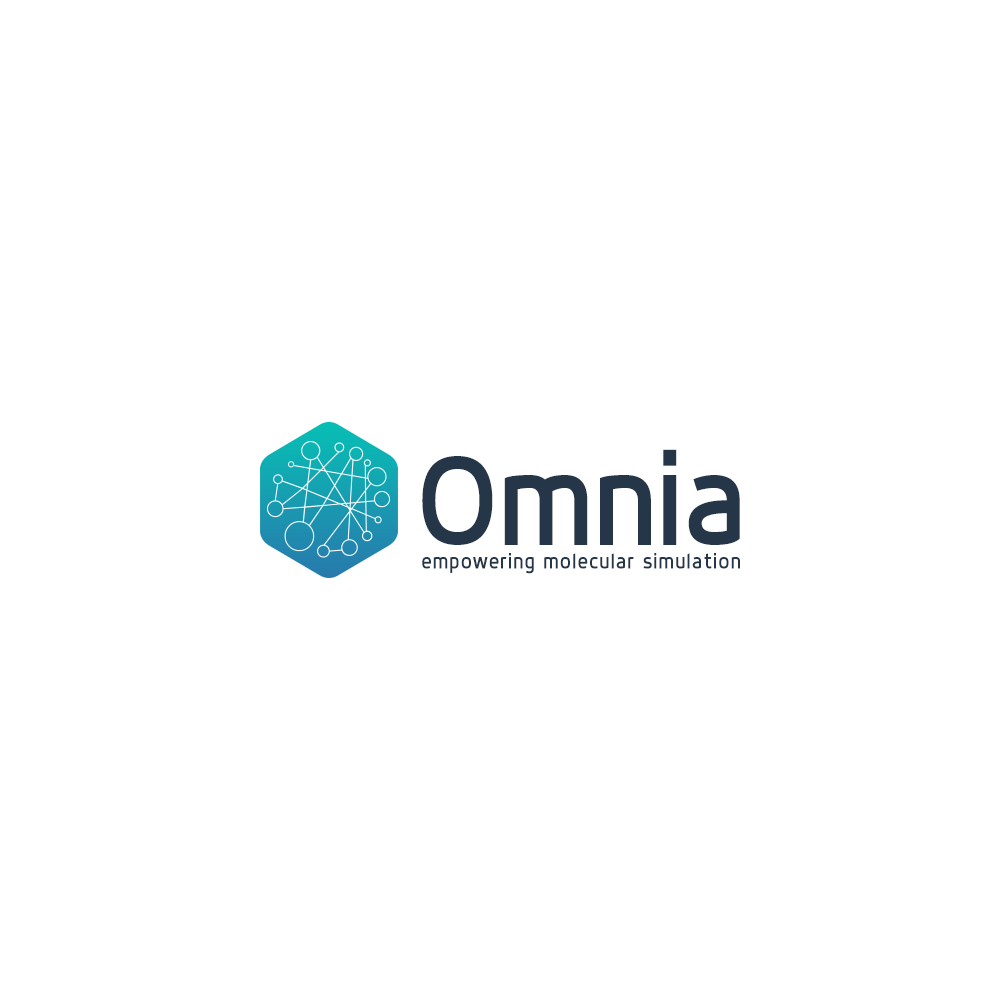
<style>
.page{position:relative;width:1000px;height:1000px;background:#ffffff}
.page>*{position:absolute;margin:0}
.t1{font:129.9px "DynoRegular";color:#253648}
.t2{font:21.2px "DynoRegular";letter-spacing:0.05em;color:#253648}
</style>
<div class="page">
<p class="t1" style="left:422px;top:449px;width:318px;height:96px">Omnia</p>
<p class="t2" style="left:422px;top:553px;width:318px;height:21px">empowering molecular simulation</p>
</div>
